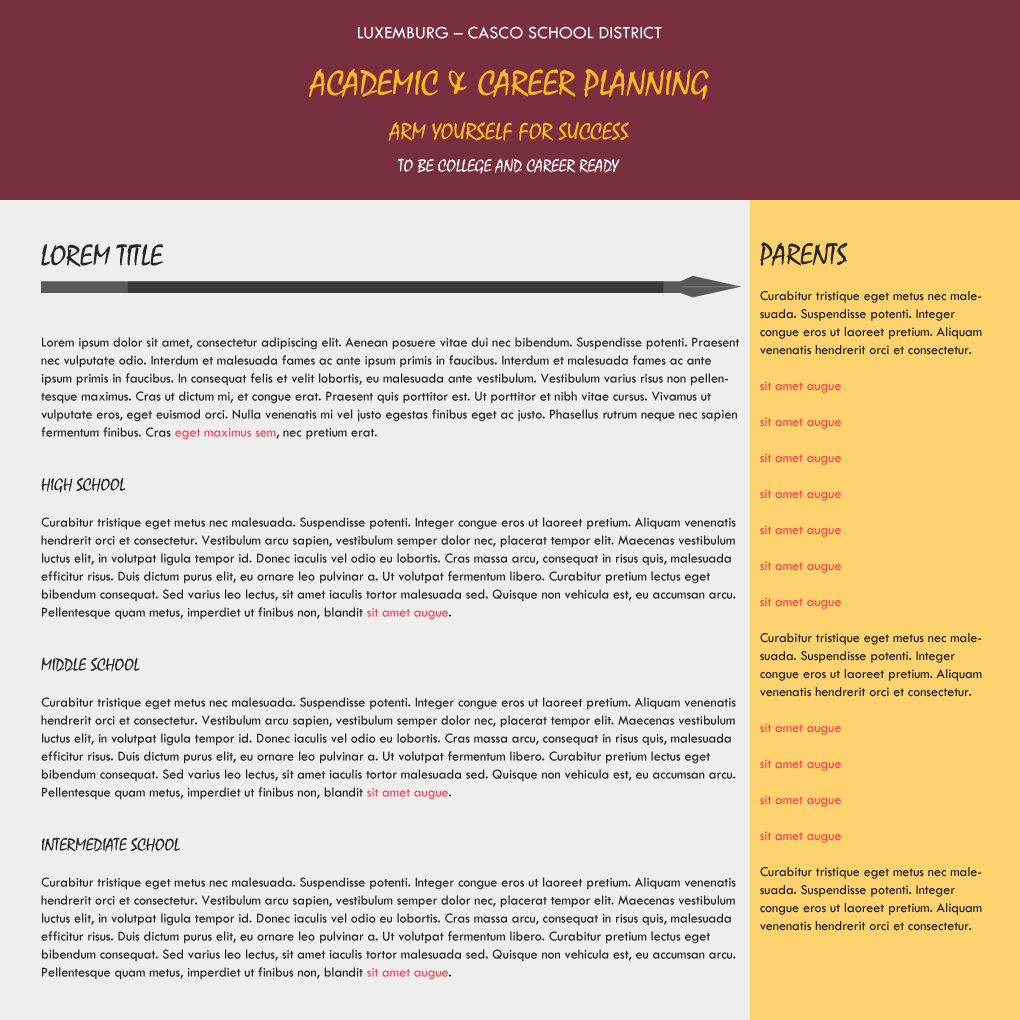
<style>
.page{position:relative;width:1020px;height:1020px;background:#eeeeee}
.page>*{position:absolute;margin:0}
.t1{font:18px "TwCenMT-Regular";color:#ffffff}
.t2{font:36px "Mistral";color:#ffb81c}
.t3{font:24px "Mistral";color:#ffb81c}
.t4{font:18px "Mistral";color:#ffffff}
.t5{font:30px "Mistral";color:#272727}
.t6{font:14px/18px "TwCenMT-Regular";color:#272727}
.t7{font:30px/18px "Mistral";color:#272727}
.t8{font:14px/18px "TwCenMT-Regular";color:#ff4258}
.t9{font:18px/18px "Mistral";color:#272727}
</style>
<div class="page">
<p class="t1" style="left:358px;top:26px;width:304px;height:13px">LUXEMBURG – CASCO SCHOOL DISTRICT</p>
<p class="t2" style="left:309px;top:68px;width:400px;height:32px">ACADEMIC &amp; CAREER PLANNING</p>
<p class="t3" style="left:388px;top:121px;width:241px;height:20px">ARM YOURSELF FOR SUCCESS</p>
<p class="t4" style="left:397px;top:158px;width:223px;height:16px">TO BE COLLEGE AND CAREER READY</p>
<p class="t5" style="left:41px;top:244px;width:122px;height:23px">LOREM TITLE</p>
<p class="t6" style="left:760px;top:242px;width:222px;height:689px"><span class="t7">PARENTS<br><br></span>Curabitur tristique eget metus nec malesuada. Suspendisse potenti. Integer congue eros ut laoreet pretium. Aliquam venenatis hendrerit orci et consectetur.<br><span class="t8"><br>sit amet augue<br><br>sit amet augue<br><br>sit amet augue<br><br>sit amet augue<br><br>sit amet augue<br><br>sit amet augue<br><br>sit amet augue<br><br></span>Curabitur tristique eget metus nec malesuada. Suspendisse potenti. Integer congue eros ut laoreet pretium. Aliquam venenatis hendrerit orci et consectetur.<br><br><span class="t8">sit amet augue<br><br>sit amet augue<br><br>sit amet augue<br><br>sit amet augue<br><br></span>Curabitur tristique eget metus nec malesuada. Suspendisse potenti. Integer congue eros ut laoreet pretium. Aliquam venenatis hendrerit orci et consectetur.</p>
<p class="t6" style="left:41px;top:337px;width:699px;height:643px">Lorem ipsum dolor sit amet, consectetur adipiscing elit. Aenean posuere vitae dui nec bibendum. Suspendisse potenti. Praesent nec vulputate odio. Interdum et malesuada fames ac ante ipsum primis in faucibus. Interdum et malesuada fames ac ante ipsum primis in faucibus. In consequat felis et velit lobortis, eu malesuada ante vestibulum. Vestibulum varius risus non pellentesque maximus. Cras ut dictum mi, et congue erat. Praesent quis porttitor est. Ut porttitor et nibh vitae cursus. Vivamus ut vulputate eros, eget euismod orci. Nulla venenatis mi vel justo egestas finibus eget ac justo. Phasellus rutrum neque nec sapien fermentum finibus. Cras <span class="t8">eget maximus sem</span>, nec pretium erat.<br><br><br><span class="t9">HIGH SCHOOL<br><br></span>Curabitur tristique eget metus nec malesuada. Suspendisse potenti. Integer congue eros ut laoreet pretium. Aliquam venenatis hendrerit orci et consectetur. Vestibulum arcu sapien, vestibulum semper dolor nec, placerat tempor elit. Maecenas vestibulum luctus elit, in volutpat ligula tempor id. Donec iaculis vel odio eu lobortis. Cras massa arcu, consequat in risus quis, malesuada efficitur risus. Duis dictum purus elit, eu ornare leo pulvinar a. Ut volutpat fermentum libero. Curabitur pretium lectus eget bibendum consequat. Sed varius leo lectus, sit amet iaculis tortor malesuada sed. Quisque non vehicula est, eu accumsan arcu. Pellentesque quam metus, imperdiet ut finibus non, blandit <span class="t8">sit amet augue</span>.<br><br><br><span class="t9">MIDDLE SCHOOL<br><br></span>Curabitur tristique eget metus nec malesuada. Suspendisse potenti. Integer congue eros ut laoreet pretium. Aliquam venenatis hendrerit orci et consectetur. Vestibulum arcu sapien, vestibulum semper dolor nec, placerat tempor elit. Maecenas vestibulum luctus elit, in volutpat ligula tempor id. Donec iaculis vel odio eu lobortis. Cras massa arcu, consequat in risus quis, malesuada efficitur risus. Duis dictum purus elit, eu ornare leo pulvinar a. Ut volutpat fermentum libero. Curabitur pretium lectus eget bibendum consequat. Sed varius leo lectus, sit amet iaculis tortor malesuada sed. Quisque non vehicula est, eu accumsan arcu. Pellentesque quam metus, imperdiet ut finibus non, blandit <span class="t8">sit amet augue</span>.<br><br><br><span class="t9">INTERMEDIATE SCHOOL<br><br></span>Curabitur tristique eget metus nec malesuada. Suspendisse potenti. Integer congue eros ut laoreet pretium. Aliquam venenatis hendrerit orci et consectetur. Vestibulum arcu sapien, vestibulum semper dolor nec, placerat tempor elit. Maecenas vestibulum luctus elit, in volutpat ligula tempor id. Donec iaculis vel odio eu lobortis. Cras massa arcu, consequat in risus quis, malesuada efficitur risus. Duis dictum purus elit, eu ornare leo pulvinar a. Ut volutpat fermentum libero. Curabitur pretium lectus eget bibendum consequat. Sed varius leo lectus, sit amet iaculis tortor malesuada sed. Quisque non vehicula est, eu accumsan arcu. Pellentesque quam metus, imperdiet ut finibus non, blandit <span class="t8">sit amet augue</span>.</p>
</div>
